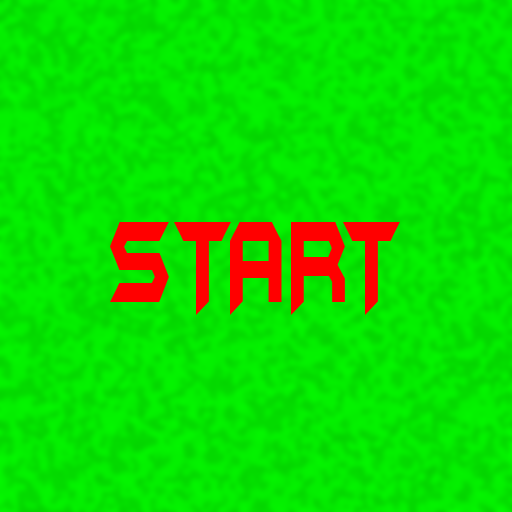
<style>
.page{position:relative;width:512px;height:512px}
.page>*{position:absolute;margin:0}
.t1{font:134.4px "BatmanForeverAlternate";color:#ff0000;scale:0.54 1}
</style>
<div class="page">
<p class="t1" style="left:110px;top:222px;width:290px;height:93px">START</p>
</div>
